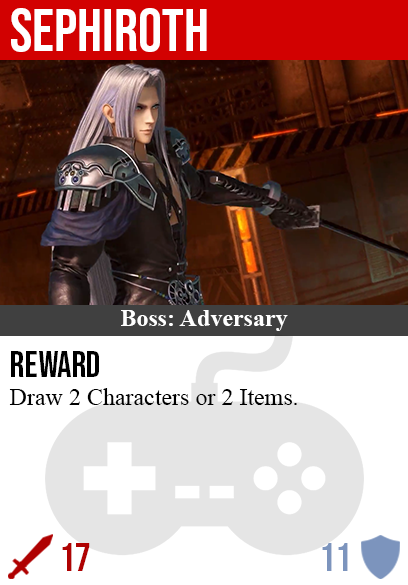
<style>
.page{position:relative;width:408px;height:585px;background:#ffffff}
.page>*{position:absolute;margin:0}
.t1{font:60px "BebasNeue-Regular";color:#ffffff}
.t2{font:24px "TimesNewRomanPS-BoldMT";color:#ffffff}
.t3{font:36px "BebasNeue-Regular";color:#000000}
.t4{font:24px "TimesNewRomanPSMT";color:#000000}
.t5{font:40px "BebasNeue-Regular";color:#af0202}
.t6{font:40px "BebasNeue-Regular";color:#7c94bd}
</style>
<div class="page">
<p class="t1" style="left:11px;top:8px;width:196px;height:44px">sephiroth</p>
<p class="t2" style="left:121px;top:310px;width:167px;height:21px">Boss: Adversary</p>
<p class="t3" style="left:11px;top:351px;width:88px;height:26px">reward</p>
<p class="t4" style="left:9px;top:388px;width:288px;height:17px">Draw 2 Characters or 2 Items.</p>
<p class="t5" style="left:62px;top:543px;width:28px;height:28px">17</p>
<p class="t6" style="left:322px;top:543px;width:26px;height:28px">11</p>
</div>
